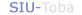
<style>
.page{position:relative;width:82px;height:15px;background:#ffffff}
.page>*{position:absolute;margin:0}
.t1{font:13.5px "Verdana";color:#7f88c0;font-weight:bold}
.t2{font:13.5px "Verdana";color:#e0e0e4;font-weight:bold}
</style>
<div class="page">
<p class="t1" style="left:10px;top:1px;width:64px;height:12px">SIU-<span class="t2">Toba</span></p>
</div>
